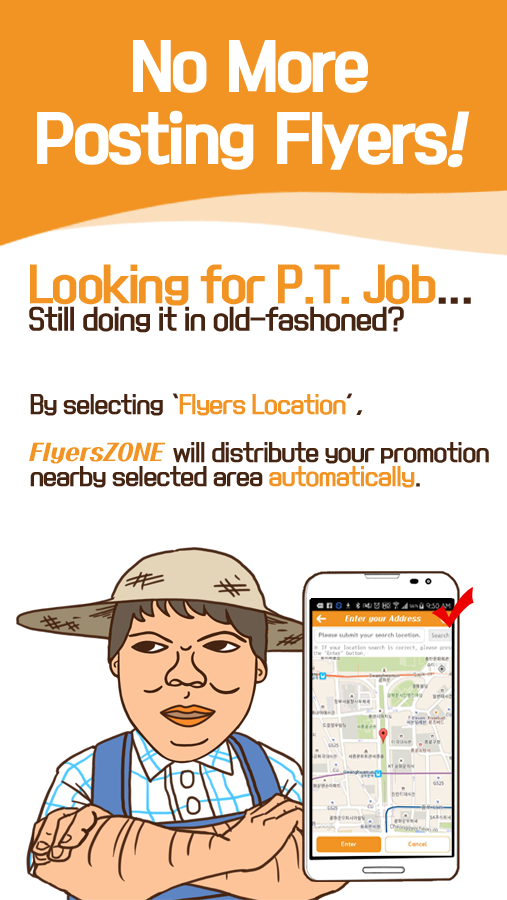
<style>
.page{position:relative;width:507px;height:900px;background:#ffffff}
.page>*{position:absolute;margin:0}
.t1{font:60px/72px "KoreanBLACK-B";letter-spacing:-0.05em;color:#ffffff}
.t2{font:60px/72px "KoreanBLACK-B";letter-spacing:-0.05em;color:#ffffff;font-style:italic}
.t3{font:26px/42px "KoreanYNMYT-M";letter-spacing:-0.05em;color:#462412}
.t4{font:42px/42px "KoreanYNMYT-B";letter-spacing:-0.05em;color:#f29423}
.t5{font:42px/42px "KoreanYNMYT-M";letter-spacing:-0.05em;color:#462412}
.t6{font:22px/24px "KoreanYNMYT-M";letter-spacing:-0.05em;color:#462412}
.t7{font:22px/24px "KoreanYNMYT-M";letter-spacing:-0.05em;color:#f29423}
.t8{font:22px/24px "KoreanPDSR-R";color:#f29423}
</style>
<div class="page">
<p class="t1" style="left:37px;top:40px;width:433px;height:130px;text-align:center">No More<br>Posting Flyers<span class="t2">!</span></p>
<p class="t3" style="left:29px;top:264px;width:442px;height:69px"><span class="t4">Looking for P.T. Job</span><span class="t5">...<br></span>Still doing it in old-fashoned?</p>
<p class="t6" style="left:29px;top:393px;width:460px;height:95px">By selecting ‘<span class="t7">Flyers Location</span>’,<br><br><span class="t8">FlyersZONE </span>will distribute your promotion<br>nearby selected area <span class="t7">automatically</span>.</p>
</div>
